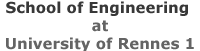
<style>
.page{position:relative;width:200px;height:51px;background:#ffffff}
.page>*{position:absolute;margin:0}
.t1{font:15px "Verdana-Bold";color:#646464}
.t2{font:15px "Verdana-Bold";color:#383838}
</style>
<div class="page">
<p class="t1" style="left:6px;top:1px;width:188px;height:51px;text-align:center"><span class="t2">School of Engineering <br></span>at<br>University of Rennes 1</p>
</div>
